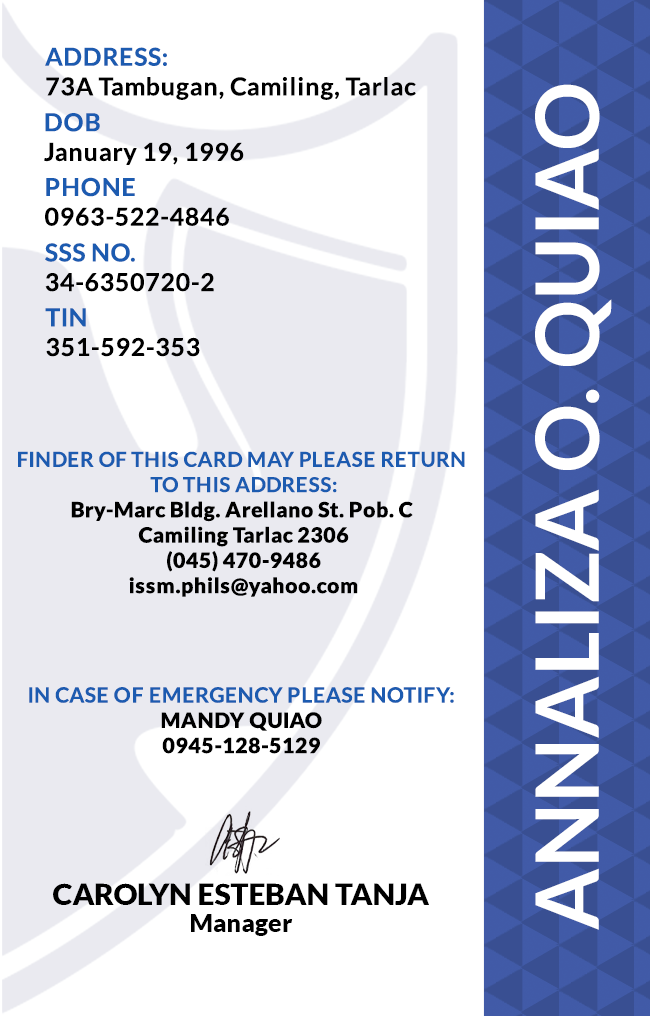
<style>
.page{position:relative;width:650px;height:1016px;background:#ffffff}
.page>*{position:absolute;margin:0}
.t1{font:24.7px/29.6px "Lato-Bold";letter-spacing:0.025em;color:#000000}
.t2{font:87.5px "Lato-Bold";color:#ffffff}
.t3{font:24.7px/29.6px "Lato-Bold";letter-spacing:0.025em}
.t4{font:21.1px "Lato-Black";letter-spacing:0.025em}
.t5{font:20.5px/25.3px "Lato-Bold";letter-spacing:0.025em;text-transform:uppercase}
.t6{font:21.1px/25.3px "Lato-Bold";letter-spacing:0.025em}
.t7{font:29.5px "Lato-Black";color:#000000}
.t8{font:25px "Lato-Black";color:#000000}
</style>
<div class="page">
<p class="t1" style="left:45px;top:47px;width:371px;height:53px">ADDRESS:<br>73A Tambugan, Camiling, Tarlac</p>
<p class="t2" style="left:535px;top:84px;width:77px;height:846px;rotate:-90deg">ANNALIZA O. QUIAO</p>
<p class="t1" style="left:44px;top:113px;width:200px;height:52px">DOB<br>January 19, 1996</p>
<p class="t3" style="left:45px;top:177px;width:184px;height:49px">PHONE <br>0963-522-4846</p>
<p class="t3" style="left:45px;top:243px;width:169px;height:49px">SSS NO.<br>34-6350720-2</p>
<p class="t1" style="left:45px;top:308px;width:155px;height:49px">TIN<br>351-592-353</p>
<p class="t4" style="left:18px;top:451px;width:447px;height:146px;text-align:center"><span class="t5">Finder of this card may please return <br>to this address:<br></span>Bry-Marc Bldg. Arellano St. Pob. C <br>Camiling Tarlac 2306<br>(045) 470-9486<br>issm.phils@yahoo.com</p>
<p class="t6" style="left:29px;top:687px;width:425px;height:67px;text-align:center">IN CASE OF EMERGENCY PLEASE NOTIFY:<br><span class="t4">MANDY QUIAO<br>0945-128-5129</span></p>
<p class="t7" style="left:53px;top:883px;width:376px;height:22px">CAROLYN ESTEBAN TANJA</p>
<p class="t8" style="left:191px;top:914px;width:102px;height:22px">Manager</p>
</div>
